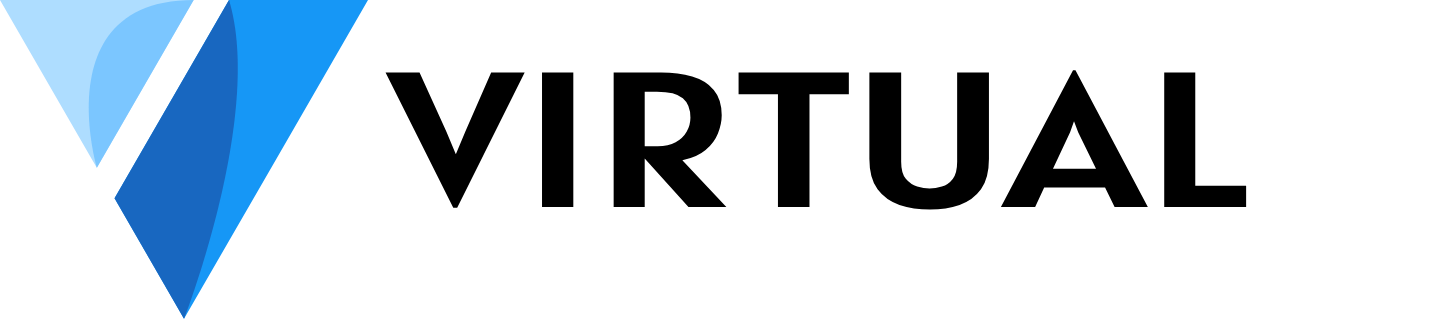
<style>
.page{position:relative;width:1431px;height:319px;background:#ffffff}
.page>*{position:absolute;margin:0}
.t1{font:192.9px "Alatsi-Regular";color:#000000;scale:1.27 1}
</style>
<div class="page">
<p class="t1" style="left:385px;top:70px;width:862px;height:140px">VIRTUAL</p>
</div>
